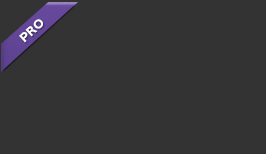
<style>
.page{position:relative;width:266px;height:154px;background:#333333}
.page>*{position:absolute;margin:0}
.t1{font:12px "BitstreamVeraSans-Bold";color:#ffffff}
</style>
<div class="page">
<p class="t1" style="left:19px;top:19px;width:24px;height:24px;rotate:-42deg">PRO</p>
</div>
